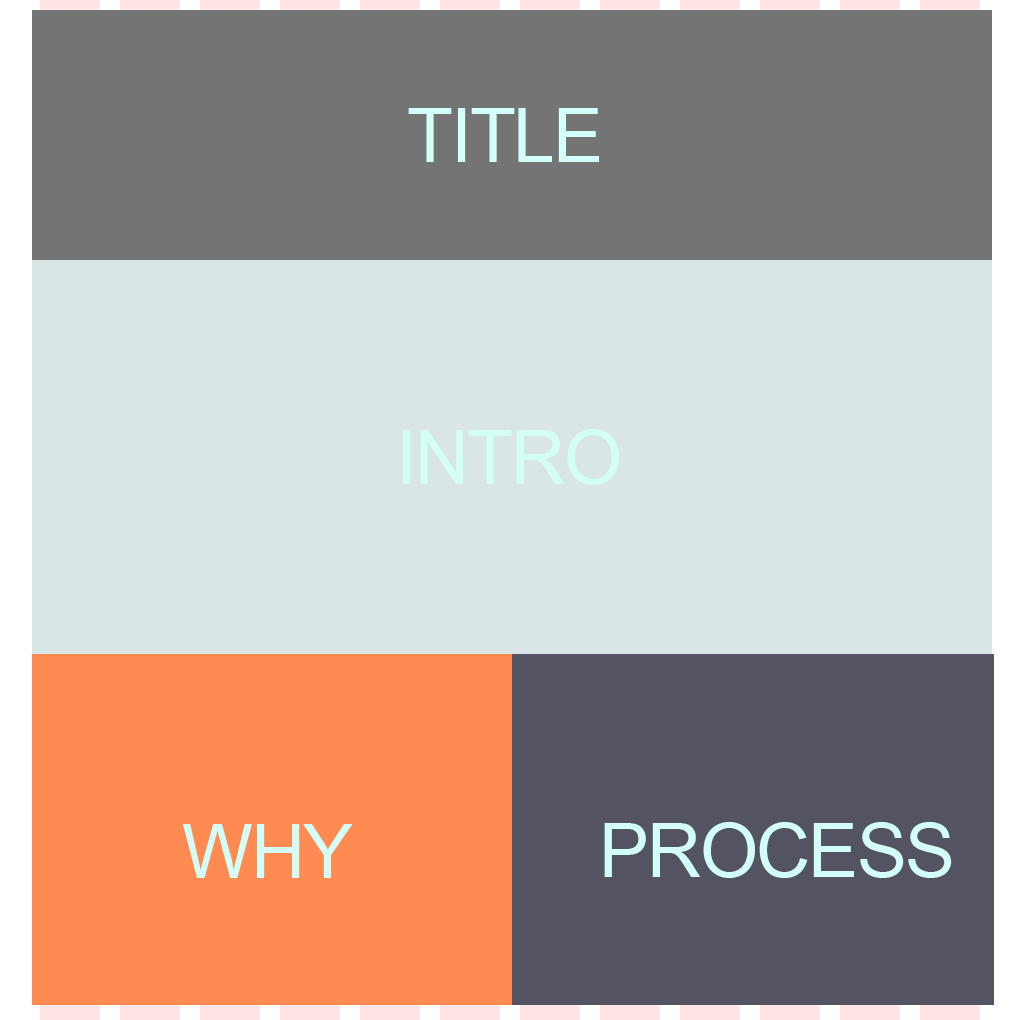
<style>
.page{position:relative;width:1020px;height:1020px;background:#dae5e7}
.page>*{position:absolute;margin:0}
.t1{font:75px "ArialMT";letter-spacing:-0.025em;color:#d2fff7}
</style>
<div class="page">
<p class="t1" style="left:408px;top:108px;width:191px;height:54px">TITLE</p>
<p class="t1" style="left:403px;top:429px;width:216px;height:56px">INTRO</p>
<p class="t1" style="left:604px;top:822px;width:348px;height:56px">PROCESS</p>
<p class="t1" style="left:183px;top:824px;width:170px;height:54px">WHY</p>
</div>
